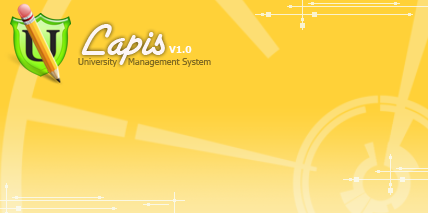
<style>
.page{position:relative;width:428px;height:213px;background:#ffd138}
.page>*{position:absolute;margin:0}
.t1{font:48px "SantaFeLetPlain";color:#fdf6f6}
.t2{font:10px "Tahoma-Bold";color:#fdfbfb}
.t3{font:9px "Tahoma";color:#836c21}
</style>
<div class="page">
<p class="t1" style="left:81px;top:24px;width:84px;height:41px">Lapis</p>
<p class="t2" style="left:169px;top:46px;width:23px;height:7px">V1.0</p>
<p class="t3" style="left:78px;top:58px;width:133px;height:9px">University    Management System</p>
</div>
